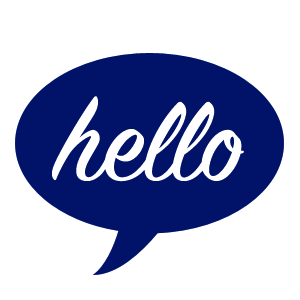
<style>
.page{position:relative;width:300px;height:300px;background:#ffffff}
.page>*{position:absolute;margin:0}
.t1{font:125px "SignPainter-HouseScript";color:#ffffff}
</style>
<div class="page">
<p class="t1" style="left:52px;top:96px;width:192px;height:86px">hello</p>
</div>
